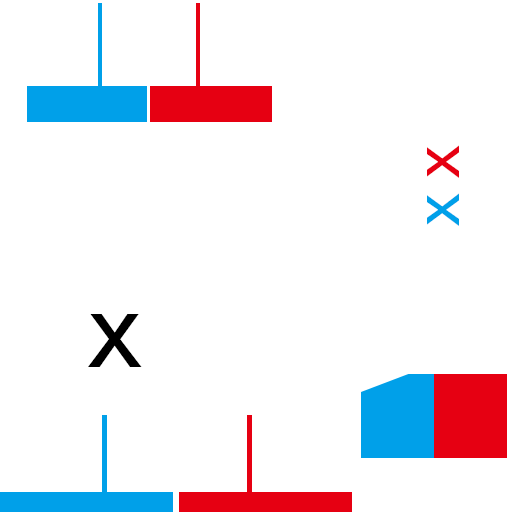
<style>
.page{position:relative;width:512px;height:512px;background:#ffffff}
.page>*{position:absolute;margin:0}
.t1{font:40px "NewRodinPro-B";color:#e60012}
.t2{font:40px "NewRodinPro-B";color:#00a0e9}
.t3{font:66.1px "NewRodinPro-B";color:#000000}
</style>
<div class="page">
<p class="t1" style="left:427px;top:145px;width:32px;height:33px;rotate:-90deg">X</p>
<p class="t2" style="left:427px;top:193px;width:32px;height:33px;rotate:-90deg">X</p>
<p class="t3" style="left:88px;top:314px;width:54px;height:53px">X</p>
</div>
